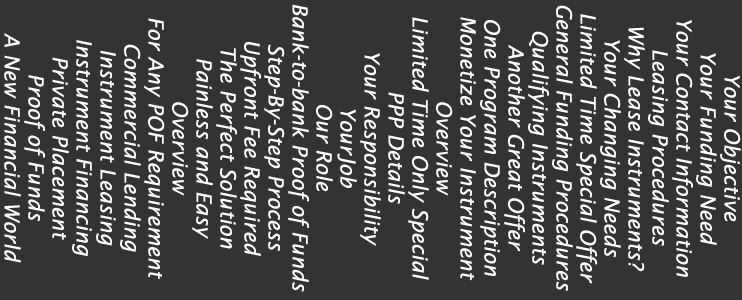
<style>
.page{position:relative;width:742px;height:300px;background:#333333}
.page>*{position:absolute;margin:0}
.t1{font:21px/24px "LucidaSans-Italic";color:#ffffff}
</style>
<div class="page">
<p class="t1" style="left:4px;top:4px;width:737px;height:288px;text-align:center;rotate:90deg">Your Objective<br>Your Funding Need<br>Your Contact Information<br>Leasing Procedures<br>Why Lease Instruments?<br>Your Changing Needs<br>Limited Time Special Offer<br>General Funding Procedures<br>Qualifying Instruments<br>Another Great Offer<br>One Program Description<br>Monetize Your Instrument<br>Overview<br>Limited Time Only Special<br>PPP Details<br>Your Responsibility<br>YourJob<br>Our Role<br>Bank-to-bank Proof of Funds<br>Step-By-Step Process<br>Upfront Fee Required<br>The Perfect Solution<br>Painless and Easy<br>Overview<br>For Any POF Requirement<br>Commercial Lending<br>Instrument Leasing<br>Instrument Financing<br>Private Placement <br>Proof of Funds<br>A New Financial World</p>
</div>
